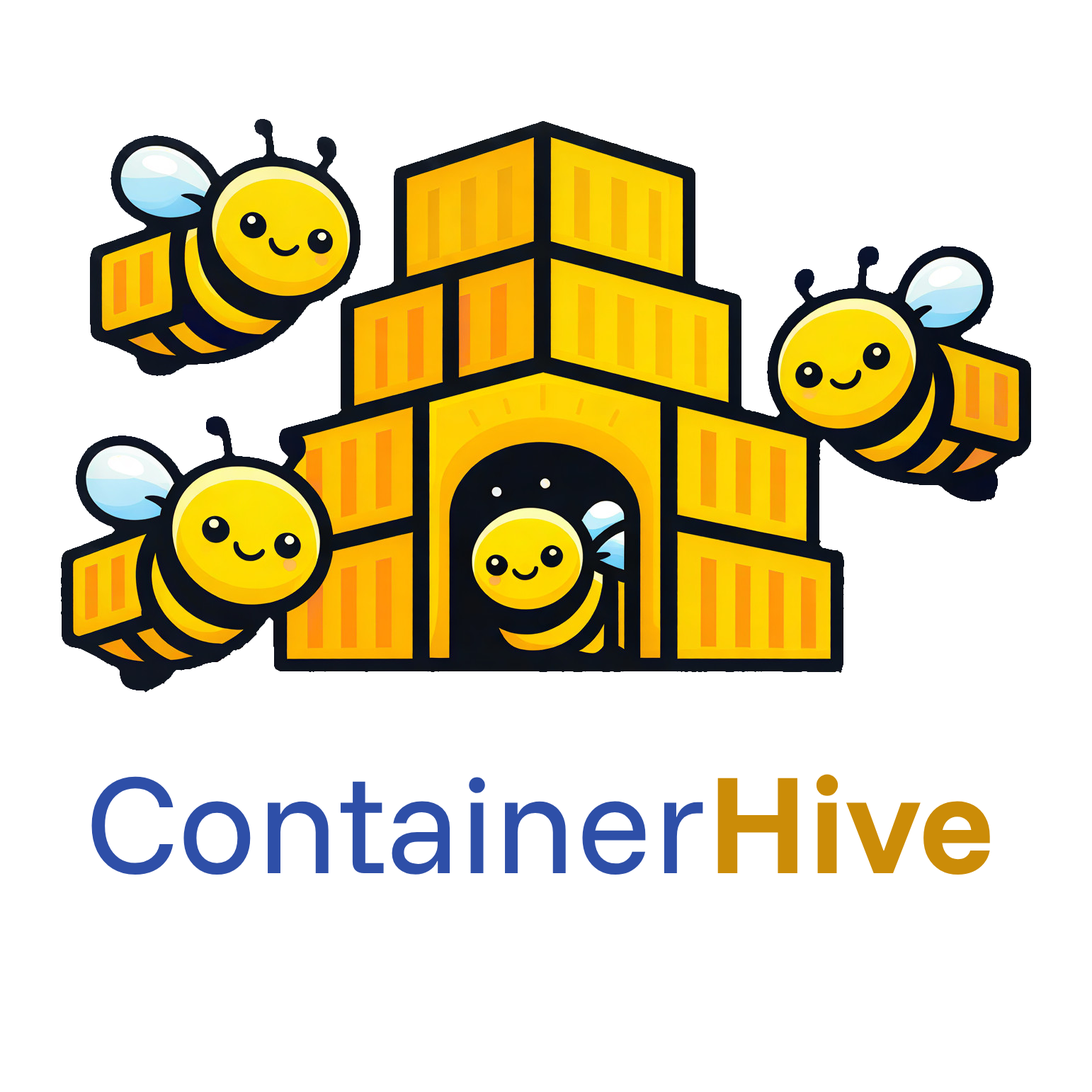
<style>
.page{position:relative;width:1092px;height:1092px;background:#ffffff}
.page>*{position:absolute;margin:0}
.t1{font:140.9px "FunnelSansLight-Regular";color:#2e4fa8}
.t2{font:140.9px "FunnelSansLight-Bold";color:#cb8c08}
</style>
<div class="page">
<p class="t1" style="left:91px;top:774px;width:899px;height:101px">Container<span class="t2">Hive</span></p>
</div>
